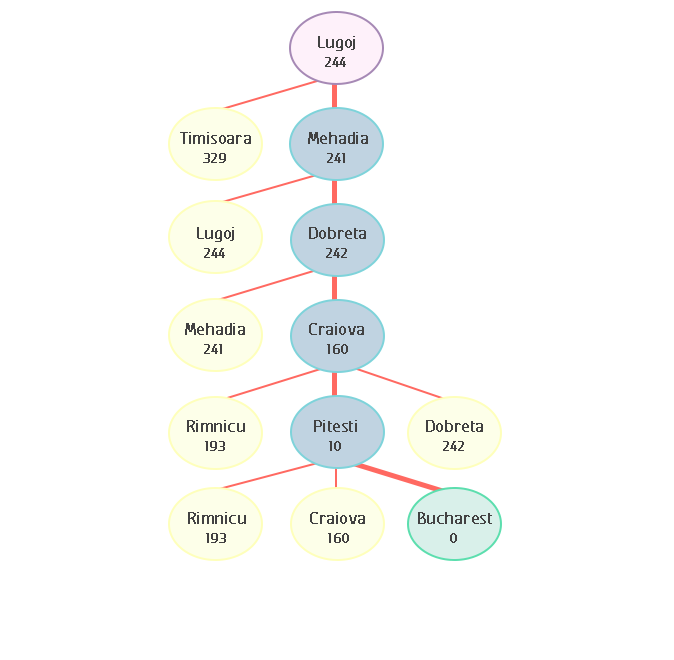
<style>
.page{position:relative;width:674px;height:660px;background:#ffffff}
.page>*{position:absolute;margin:0}
.t1{font:20.8px "FCActiveRegular";color:#424242;font-weight:bold}
.t2{font:16.7px "FCActiveRegular";color:#424141;font-weight:bold}
</style>
<div class="page">
<p class="t1" style="left:318px;top:36px;width:37px;height:15px">Lugoj</p>
<p class="t2" style="left:325px;top:57px;width:21px;height:10px">244</p>
<p class="t1" style="left:180px;top:132px;width:71px;height:12px">Timisoara</p>
<p class="t1" style="left:308px;top:132px;width:60px;height:12px">Mehadia</p>
<p class="t2" style="left:203px;top:153px;width:23px;height:10px">329</p>
<p class="t2" style="left:327px;top:153px;width:18px;height:10px">241</p>
<p class="t1" style="left:197px;top:227px;width:37px;height:15px">Lugoj</p>
<p class="t1" style="left:309px;top:227px;width:57px;height:12px">Dobreta</p>
<p class="t2" style="left:204px;top:248px;width:21px;height:10px">244</p>
<p class="t2" style="left:326px;top:248px;width:21px;height:10px">242</p>
<p class="t1" style="left:185px;top:323px;width:60px;height:12px">Mehadia</p>
<p class="t1" style="left:309px;top:323px;width:55px;height:12px">Craiova</p>
<p class="t2" style="left:204px;top:344px;width:18px;height:10px">241</p>
<p class="t2" style="left:327px;top:344px;width:21px;height:10px">160</p>
<p class="t1" style="left:187px;top:420px;width:58px;height:12px">Rimnicu</p>
<p class="t1" style="left:314px;top:420px;width:43px;height:12px">Pitesti</p>
<p class="t1" style="left:426px;top:420px;width:57px;height:12px">Dobreta</p>
<p class="t2" style="left:205px;top:441px;width:20px;height:10px">193</p>
<p class="t2" style="left:329px;top:441px;width:12px;height:10px">10</p>
<p class="t2" style="left:443px;top:441px;width:21px;height:10px">242</p>
<p class="t1" style="left:188px;top:512px;width:58px;height:12px">Rimnicu</p>
<p class="t1" style="left:310px;top:512px;width:55px;height:12px">Craiova</p>
<p class="t1" style="left:418px;top:512px;width:74px;height:12px">Bucharest</p>
<p class="t2" style="left:206px;top:533px;width:20px;height:10px">193</p>
<p class="t2" style="left:328px;top:533px;width:21px;height:10px">160</p>
<p class="t2" style="left:450px;top:533px;width:7px;height:10px">0</p>
</div>
